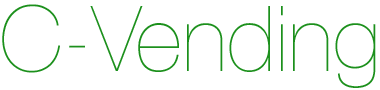
<style>
.page{position:relative;width:380px;height:90px;background:#ffffff}
.page>*{position:absolute;margin:0}
.t1{font:91px "HelveticaNeue-UltraLight";color:#1c901c}
</style>
<div class="page">
<p class="t1" style="left:2px;top:4px;width:374px;height:84px">C-Vending</p>
</div>
